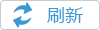
<style>
.page{position:relative;width:100px;height:30px;background:#ffffff}
.page>*{position:absolute;margin:0}
.t1{font:18px "MicrosoftYaHei";color:#3998d6}
</style>
<div class="page">
<p class="t1" style="left:47px;top:7px;width:36px;height:16px">刷新</p>
</div>
